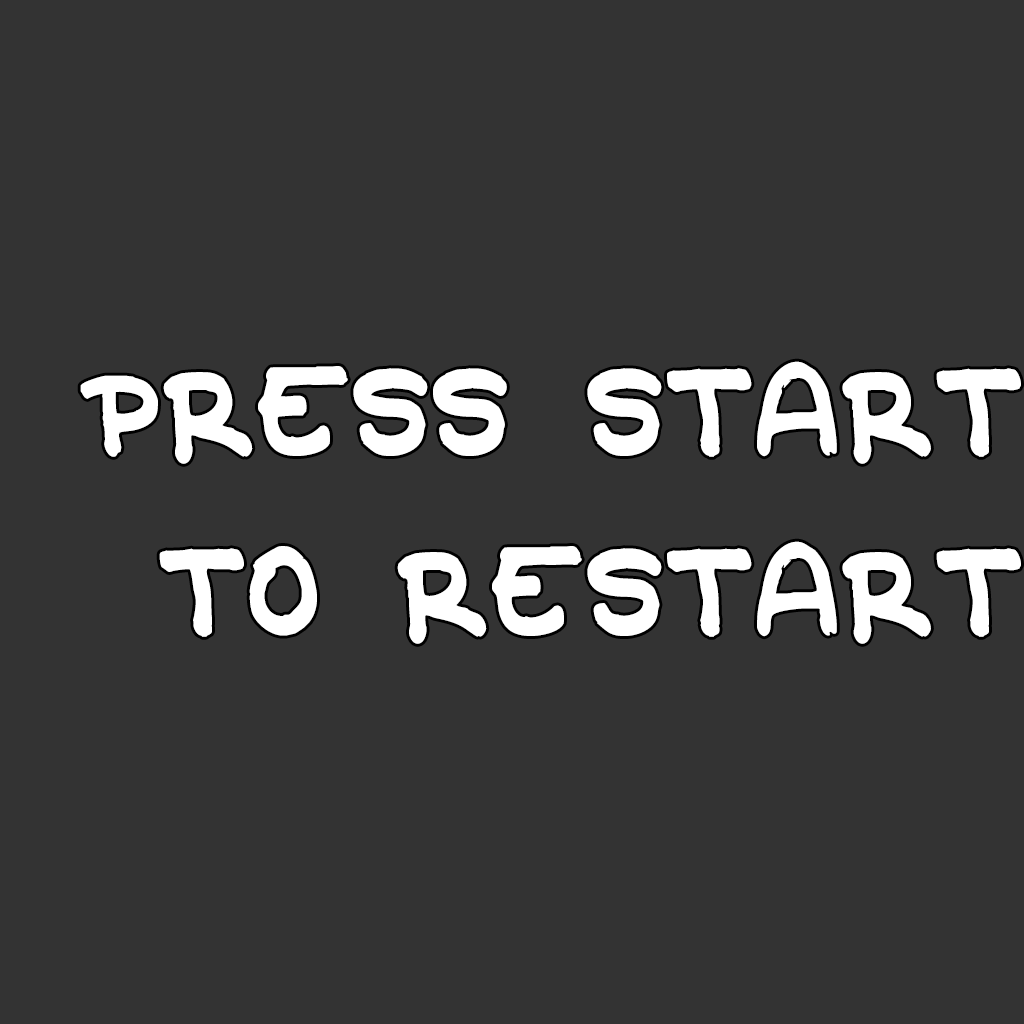
<style>
.page{position:relative;width:1024px;height:1024px;background:#333333}
.page>*{position:absolute;margin:0}
.t1{font:150px "OldCave";color:#ffffff}
</style>
<div class="page">
<p class="t1" style="left:80px;top:361px;width:941px;height:283px;text-align:right">Press start<br>to restart</p>
</div>
